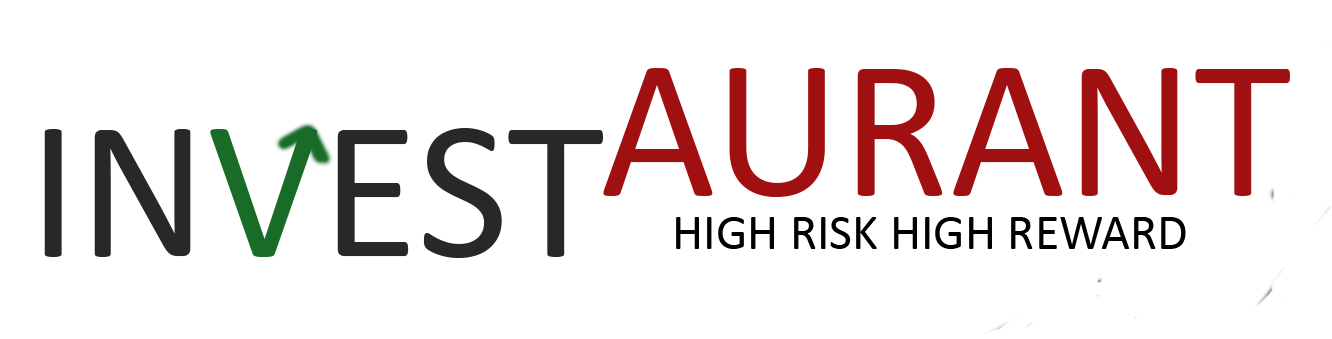
<style>
.page{position:relative;width:1332px;height:339px;background:#ffffff}
.page>*{position:absolute;margin:0}
.t1{font:200px "Calibri";color:#a11010}
.t2{font:200px "Calibri";color:#282828}
.t3{font:200px "Calibri";color:#186c28}
</style>
<div class="page">
<p class="t1" style="left:603px;top:68px;width:687px;height:129px">AURANT</p>
<p class="t2" style="left:44px;top:128px;width:559px;height:130px">IN<span class="t3">V</span>EST</p>
</div>
